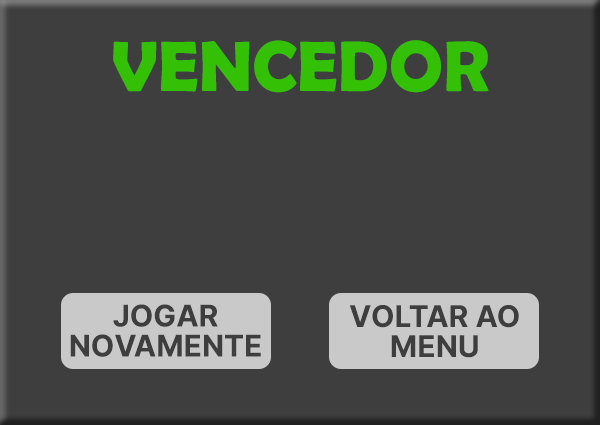
<style>
.page{position:relative;width:600px;height:425px;background:#3e3e3e}
.page>*{position:absolute;margin:0}
.t1{font:72px "BerlinSansFBDemi-Bold";color:#34c004}
.t2{font:30px/30px "InterUI-Bold";color:#3e3e3e}
</style>
<div class="page">
<p class="t1" style="left:113px;top:40px;width:376px;height:53px">VENCEDOR</p>
<p class="t2" style="left:70px;top:304px;width:191px;height:53px;text-align:center">JOGAR<br>NOVAMENTE</p>
<p class="t2" style="left:349px;top:305px;width:170px;height:53px;text-align:center">VOLTAR AO<br>MENU</p>
</div>
